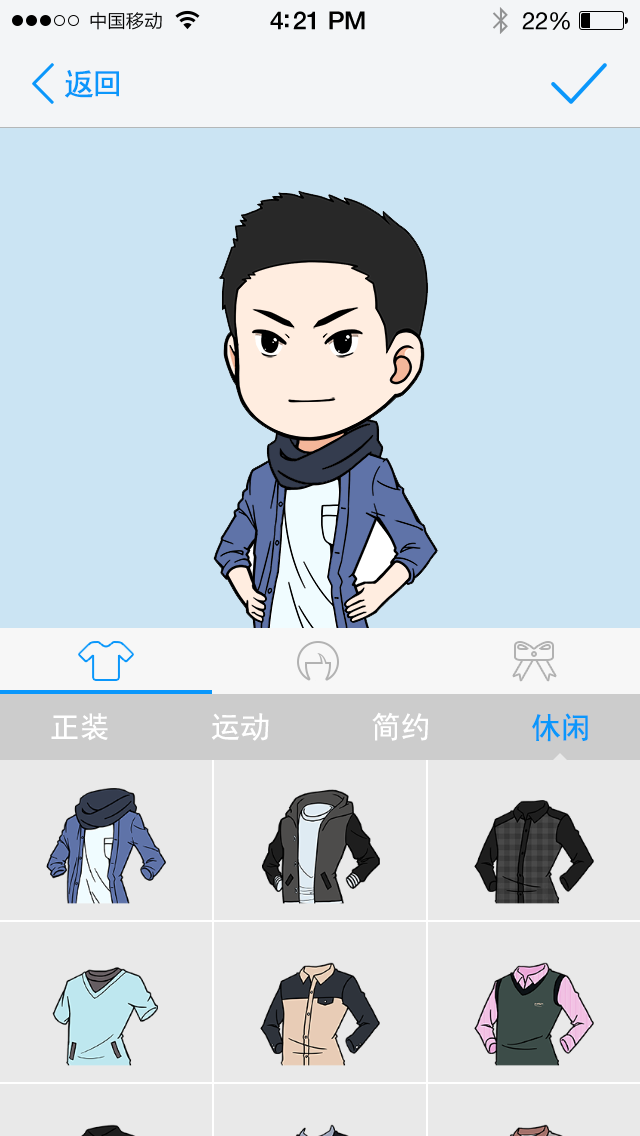
<style>
.page{position:relative;width:640px;height:1136px;background:#cbe4f3}
.page>*{position:absolute;margin:0}
.t1{font:30px "SimHei";letter-spacing:-0.075em;color:#0a97fb;font-weight:bold}
.t2{font:30px "SimHei";letter-spacing:-0.01em;color:#ffffff}
.t3{font:30px "SimHei";letter-spacing:-0.01em;color:#0a97fb}
</style>
<div class="page">
<p class="t1" style="left:65px;top:70px;width:54px;height:28px">返回</p>
<p class="t2" style="left:51px;top:713px;width:57px;height:28px">正装</p>
<p class="t2" style="left:51px;top:713px;width:57px;height:28px">正装</p>
<p class="t2" style="left:51px;top:713px;width:57px;height:28px">正装</p>
<p class="t2" style="left:51px;top:713px;width:57px;height:28px">正装</p>
<p class="t2" style="left:211px;top:713px;width:58px;height:28px">运动</p>
<p class="t2" style="left:211px;top:713px;width:58px;height:28px">运动</p>
<p class="t2" style="left:211px;top:713px;width:58px;height:28px">运动</p>
<p class="t2" style="left:211px;top:713px;width:58px;height:28px">运动</p>
<p class="t2" style="left:372px;top:712px;width:56px;height:29px">简约</p>
<p class="t2" style="left:372px;top:712px;width:56px;height:29px">简约</p>
<p class="t2" style="left:372px;top:712px;width:56px;height:29px">简约</p>
<p class="t2" style="left:372px;top:712px;width:56px;height:29px">简约</p>
<p class="t3" style="left:532px;top:713px;width:56px;height:29px">休闲</p>
<p class="t3" style="left:532px;top:713px;width:56px;height:29px">休闲</p>
<p class="t3" style="left:532px;top:713px;width:56px;height:29px">休闲</p>
<p class="t3" style="left:532px;top:713px;width:56px;height:29px">休闲</p>
</div>
